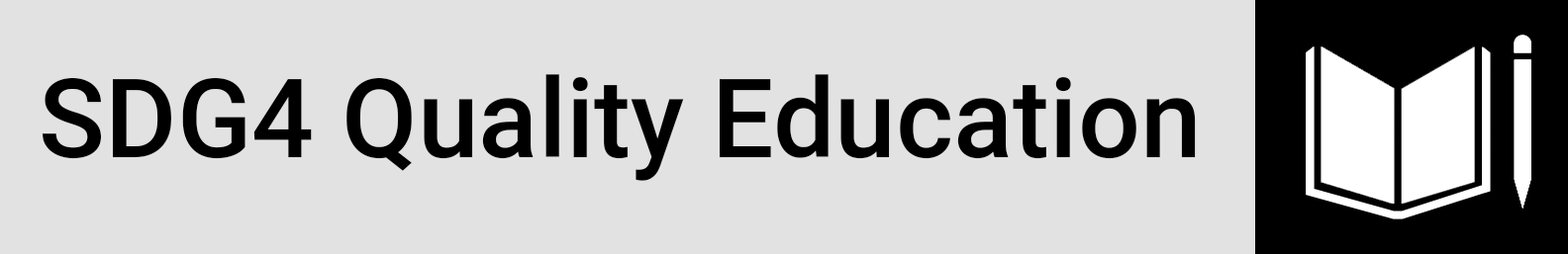
<style>
.page{position:relative;width:1568px;height:254px;background:#e2e2e2}
.page>*{position:absolute;margin:0}
.t1{font:109.9px "Roboto-Medium";color:#000000}
</style>
<div class="page">
<p class="t1" style="left:43px;top:74px;width:1153px;height:107px">SDG4 Quality Education</p>
</div>
